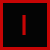
<style>
.page{position:relative;width:50px;height:50px;background:#040404}
.page>*{position:absolute;margin:0}
.t1{font:27.6px "LucidaGrande";color:#c70505}
</style>
<div class="page">
<p class="t1" style="left:22px;top:15px;width:4px;height:20px">I</p>
</div>
